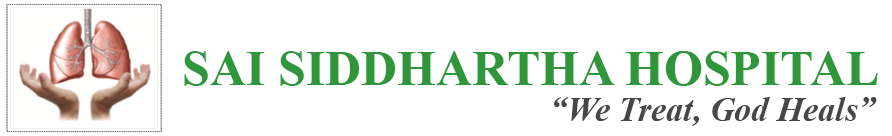
<style>
.page{position:relative;width:892px;height:136px;background:#ffffff}
.page>*{position:absolute;margin:0}
.t1{font:50px "TimesNewRomanPS-BoldMT";color:#2f963b}
.t2{font:34px "TimesNewRomanPS-BoldItalicMT";color:#474747}
</style>
<div class="page">
<p class="t1" style="left:184px;top:51px;width:694px;height:35px">SAI SIDDHARTHA HOSPITAL</p>
<p class="t2" style="left:554px;top:97px;width:323px;height:29px">“We Treat, God Heals”</p>
</div>
